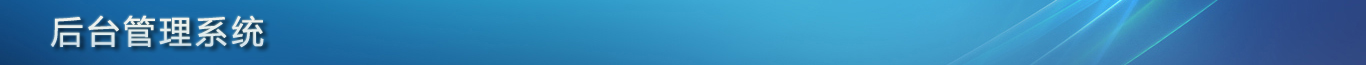
<style>
.page{position:relative;width:1366px;height:65px}
.page>*{position:absolute;margin:0}
.t1{font:32px "MicrosoftYaHei";letter-spacing:0.13em;color:#f1f1f1}
</style>
<div class="page">
<p class="t1" style="left:51px;top:15px;width:213px;height:33px">后台管理系统</p>
</div>
